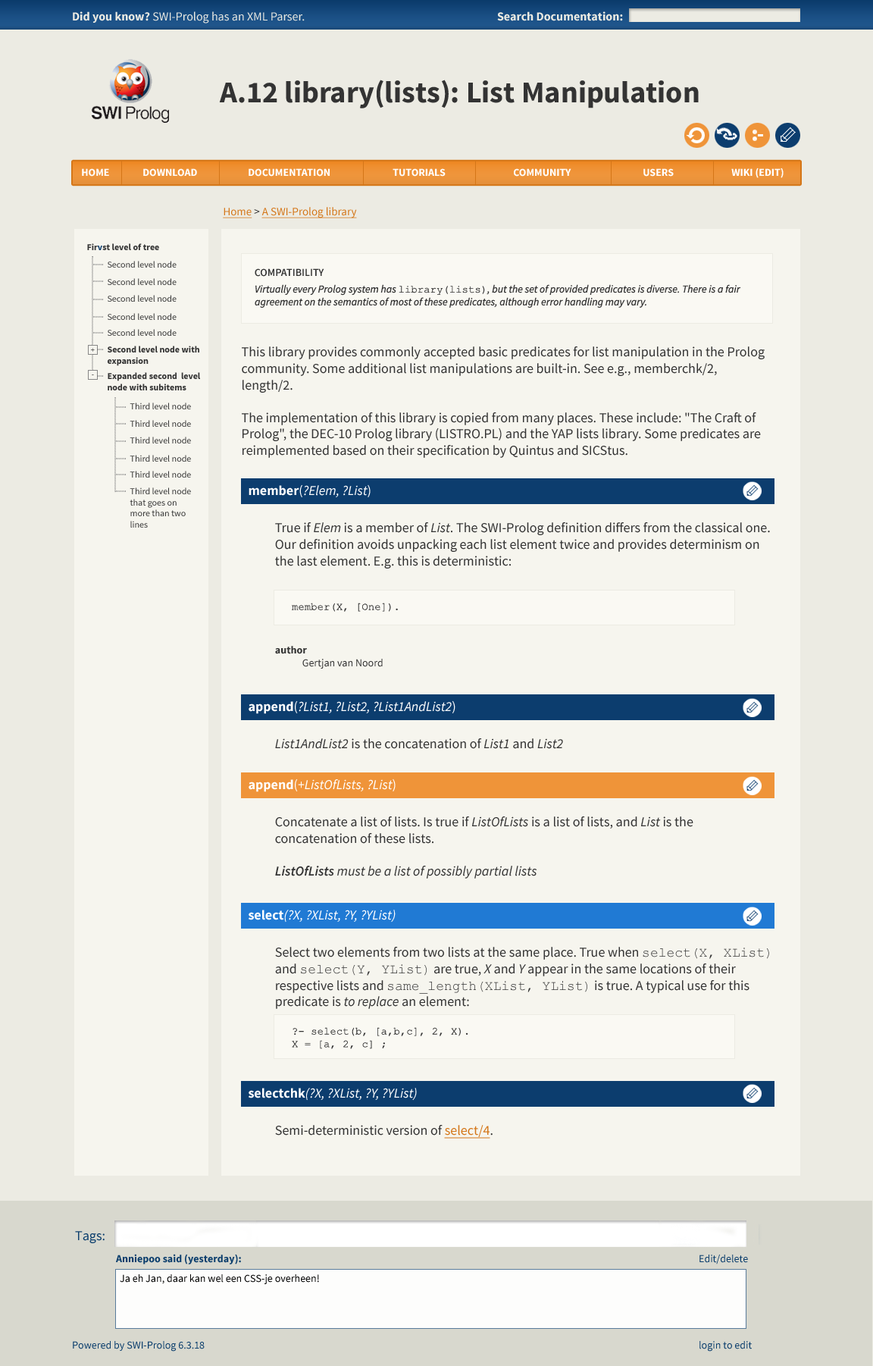
<style>
.page{position:relative;width:873px;height:1366px;background:#f6f5ee}
.page>*{position:absolute;margin:0}
.t1{font:12.1px "SourceSansPro-Regular";color:#ecebe3}
.t2{font:12.1px "SourceSansPro-Bold";color:#ecebe3}
.t3{font:30.3px "SourceSansPro-Bold";color:#333333}
.t4{font:10.6px "SourceSansPro-Bold";color:#ffffff;text-transform:uppercase}
.t5{font:11.4px "SourceSansPro-Regular";color:#d47618;text-decoration:underline}
.t6{font:11.4px "SourceSansPro-Regular";color:#333333}
.t7{font:9.1px "SourceSansPro-Bold";color:#333333}
.t8{font:9.1px "SourceSansPro-Bold";color:#0c3d6e}
.t9{font:9.1px "SourceSansPro-Regular";color:#333333}
.t10{font:10.6px "SourceSansPro-Semibold";color:#333333;text-transform:uppercase}
.t11{font:10.6px "SourceSansPro-It";color:#333333}
.t12{font:10.6px "CourierNewPSMT";color:#333333}
.t13{font:7.6px "SourceSansPro-Regular"}
.t14{font:13.6px "SourceSansPro-Regular";color:#333333}
.t15{font:13.6px "SourceSansPro-It";color:#333333}
.t16{font:13.6px "SourceSansPro-It";color:#ffffff}
.t17{font:13.6px "SourceSansPro-Bold";color:#ffffff}
.t18{font:13.6px "SourceSansPro-Regular";color:#ffffff}
.t19{font:10.6px "SourceSansPro-Regular";color:#333333}
.t20{font:10.6px "SourceSansPro-Bold";color:#333333}
.t21{font:13.6px "SourceSansPro-SemiboldIt";color:#333333}
.t22{font:13.6px "CourierNewPSMT";color:#333333}
.t23{font:13.6px "SourceSansPro-Regular";color:#d47618;text-decoration:underline}
.t24{font:13.6px "SourceSansPro-Regular";color:#0a3d6c}
.t25{font:10.6px "SourceSansPro-Bold";color:#0a3d6c}
.t26{font:10.6px "SourceSansPro-Regular";color:#0a3d6c}
.t27{font:10.6px "SourceSansPro-Regular";color:#000000}
</style>
<div class="page">
<p class="t1" style="left:73px;top:11px;width:232px;height:12px"><span class="t2">Did you know? </span>SWI-Prolog has an XML Parser.</p>
<p class="t2" style="left:497px;top:11px;width:126px;height:10px">Search Documentation:</p>
<p class="t3" style="left:219px;top:80px;width:480px;height:28px">A.12 library(lists): List Manipulation</p>
<p class="t4" style="left:82px;top:168px;width:27px;height:9px">HOME</p>
<p class="t4" style="left:143px;top:168px;width:54px;height:9px">Download</p>
<p class="t4" style="left:249px;top:168px;width:81px;height:9px">DOCUMENTATION</p>
<p class="t4" style="left:393px;top:168px;width:53px;height:9px">TUTORIALS</p>
<p class="t4" style="left:514px;top:168px;width:57px;height:9px">COMMUNITY</p>
<p class="t4" style="left:643px;top:168px;width:31px;height:9px">Users</p>
<p class="t4" style="left:731px;top:167px;width:53px;height:11px">Wiki (edit)</p>
<p class="t5" style="left:223px;top:207px;width:134px;height:11px">Home <span class="t6">&gt; </span>A SWI-Prolog library</p>
<p class="t7" style="left:87px;top:243px;width:72px;height:7px">Fir<span class="t8">v</span>st level of tree</p>
<p class="t9" style="left:108px;top:261px;width:69px;height:7px">Second level node</p>
<p class="t10" style="left:255px;top:268px;width:69px;height:9px">Compatibility</p>
<p class="t9" style="left:108px;top:278px;width:69px;height:7px">Second level node</p>
<p class="t11" style="left:255px;top:284px;width:486px;height:24px">Virtually every Prolog system has <span class="t12">library(lists)</span>, but the set of provided predicates is diverse. There is a fair agreement on the semantics of most of these predicates, although error handling may vary.</p>
<p class="t9" style="left:108px;top:295px;width:69px;height:7px">Second level node</p>
<p class="t9" style="left:108px;top:313px;width:69px;height:7px">Second level node</p>
<p class="t9" style="left:108px;top:329px;width:69px;height:7px">Second level node</p>
<p class="t13" style="left:91px;top:348px;width:4px;height:4px">+</p>
<p class="t7" style="left:108px;top:346px;width:91px;height:20px">Second level node with <br>expansion</p>
<p class="t14" style="left:242px;top:346px;width:523px;height:112px"><span class="t15"><br></span><br>This library provides commonly accepted basic predicates for list manipulation in the Prolog community. Some additional list manipulations are built-in. See e.g., memberchk/2, length/2.<br><br>The implementation of this library is copied from many places. These include: "The Craft of Prolog", the DEC-10 Prolog library (LISTRO.PL) and the YAP lists library. Some predicates are reimplemented based on their specification by Quintus and SICStus.</p>
<p class="t13" style="left:92px;top:374px;width:2px;height:1px">-</p>
<p class="t7" style="left:108px;top:372px;width:92px;height:18px">Expanded second  level<br>node with subitems</p>
<p class="t9" style="left:130px;top:402px;width:61px;height:7px">Third level node</p>
<p class="t9" style="left:130px;top:420px;width:61px;height:7px">Third level node</p>
<p class="t9" style="left:130px;top:437px;width:61px;height:6px">Third level node</p>
<p class="t9" style="left:130px;top:455px;width:61px;height:7px">Third level node</p>
<p class="t9" style="left:130px;top:471px;width:61px;height:6px">Third level node</p>
<p class="t16" style="left:249px;top:484px;width:122px;height:13px"><span class="t17">member</span><span class="t18">(</span>?Elem, ?List<span class="t18">)</span></p>
<p class="t9" style="left:130px;top:487px;width:61px;height:41px">Third level node<br>that goes on <br>more than two<br>lines</p>
<p class="t14" style="left:275px;top:522px;width:495px;height:46px">True if <span class="t15">Elem </span>is a member of <span class="t15">List</span>. The SWI-Prolog definition differs from the classical one. Our definition avoids unpacking each list element twice and provides determinism on the last element. E.g. this is deterministic:</p>
<p class="t12" style="left:292px;top:603px;width:106px;height:9px">member(X, [One]).</p>
<p class="t19" style="left:275px;top:646px;width:108px;height:22px"><span class="t20">author<br></span> Gertjan van Noord</p>
<p class="t16" style="left:249px;top:700px;width:206px;height:14px"><span class="t17">append</span><span class="t18">(</span>?List1, ?List2, ?List1AndList2<span class="t18">)</span></p>
<p class="t14" style="left:275px;top:738px;width:288px;height:11px"><span class="t15">List1AndList2</span> is the concatenation of <span class="t15">List1</span> and <span class="t15">List2</span></p>
<p class="t16" style="left:249px;top:778px;width:147px;height:14px"><span class="t17">append</span><span class="t18">(</span>+ListOfLists, ?List<span class="t18">)</span></p>
<p class="t15" style="left:275px;top:816px;width:418px;height:62px"><span class="t14">Concatenate a list of lists. Is true if </span>ListOfLists<span class="t14"> is a list of lists, and </span>List <span class="t14">is the concatenation of these lists.<br><br></span><span class="t21">ListOfLists </span>must be a list of possibly partial lists</p>
<p class="t16" style="left:249px;top:909px;width:147px;height:13px"><span class="t17">select</span>(?X, ?XList, ?Y, ?YList)</p>
<p class="t14" style="left:275px;top:947px;width:494px;height:62px">Select two elements from two lists at the same place. True when <span class="t22">select(X, XList)</span> and <span class="t22">select(Y, YList)</span> are true, <span class="t15">X</span> and <span class="t15">Y</span> appear in the same locations of their respective lists and <span class="t22">same_length(XList, YList)</span> is true. A typical use for this predicate is <span class="t15">to replace</span> an element:</p>
<p class="t12" style="left:292px;top:1027px;width:176px;height:22px">?- select(b, [a,b,c], 2, X).<br>X = [a, 2, c] ;<br>X = [a, b, c].</p>
<p class="t16" style="left:249px;top:1088px;width:168px;height:12px"><span class="t17">selectchk</span>(?X, ?XList, ?Y, ?YList)</p>
<p class="t14" style="left:275px;top:1125px;width:218px;height:13px">Semi-deterministic version of <span class="t23">select/4</span>.</p>
<p class="t24" style="left:75px;top:1231px;width:30px;height:12px">Tags:</p>
<p class="t25" style="left:116px;top:1254px;width:125px;height:10px">Anniepoo said (yesterday):</p>
<p class="t26" style="left:700px;top:1254px;width:48px;height:10px">Edit/delete</p>
<p class="t27" style="left:120px;top:1274px;width:199px;height:10px">Ja eh Jan, daar kan wel een CSS-je overheen!</p>
<p class="t26" style="left:73px;top:1341px;width:132px;height:10px">Powered by SWI-Prolog 6.3.18</p>
<p class="t26" style="left:700px;top:1341px;width:52px;height:10px">login to edit</p>
</div>
